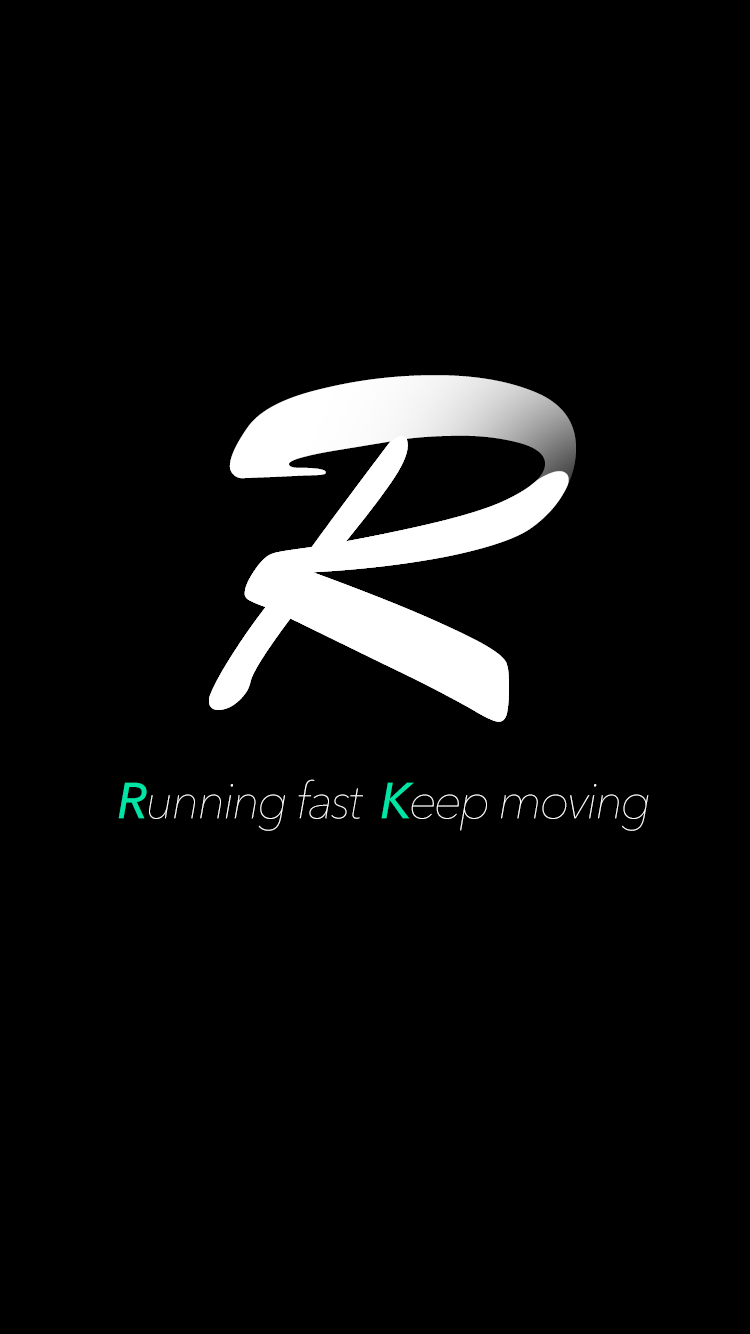
<style>
.page{position:relative;width:750px;height:1334px;background:#000000}
.page>*{position:absolute;margin:0}
.t1{font:511.6px "STXingkaiSC-Bold";color:#ffffff}
.t2{font:50px "AvenirNext-UltraLightItalic";letter-spacing:-0.05em;color:#ffffff}
.t3{font:50px "AvenirNext-MediumItalic";letter-spacing:-0.05em;color:#00e4a6;text-transform:uppercase}
</style>
<div class="page">
<p class="t1" style="left:209px;top:375px;width:367px;height:347px">R</p>
<p class="t1" style="left:209px;top:375px;width:367px;height:347px">R</p>
<p class="t2" style="left:118px;top:779px;width:531px;height:52px"><span class="t3">R</span>unning fast  <span class="t3">K</span>eep moving</p>
</div>
